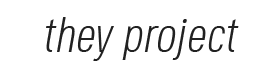
<style>
.page{position:relative;width:280px;height:82px;background:#ffffff}
.page>*{position:absolute;margin:0}
.t1{font:48px "JaneRoe-Light";color:#212121;font-style:italic}
</style>
<div class="page">
<p class="t1" style="left:46px;top:17px;width:193px;height:44px">they project</p>
</div>
